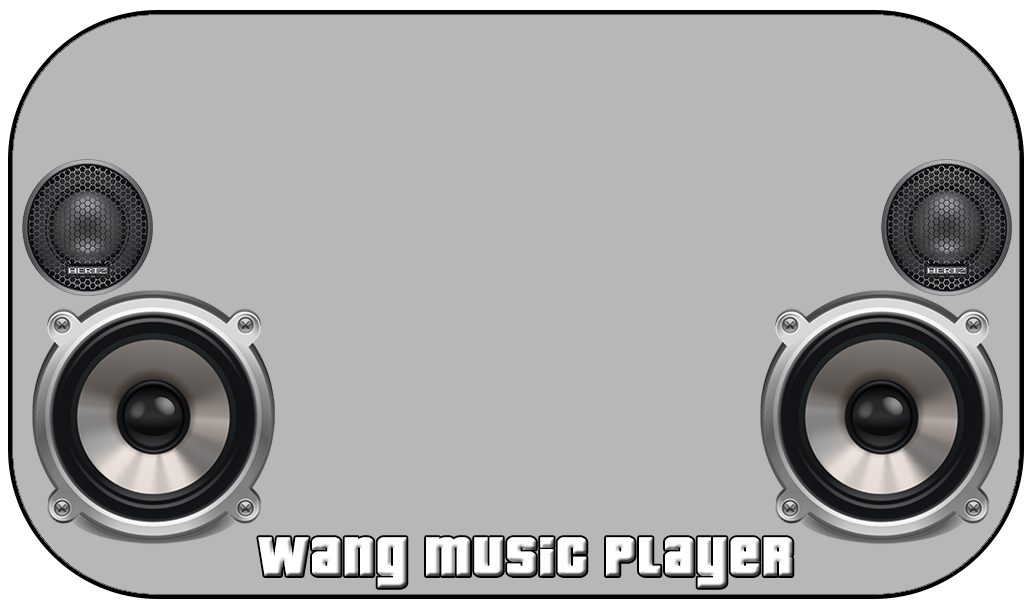
<style>
.page{position:relative;width:1035px;height:607px;background:#b7b7b8}
.page>*{position:absolute;margin:0}
.t1{font:75px "Pricedown";color:#ffffff;font-weight:bold}
</style>
<div class="page">
<p class="t1" style="left:258px;top:537px;width:535px;height:51px">Wang music player</p>
</div>
